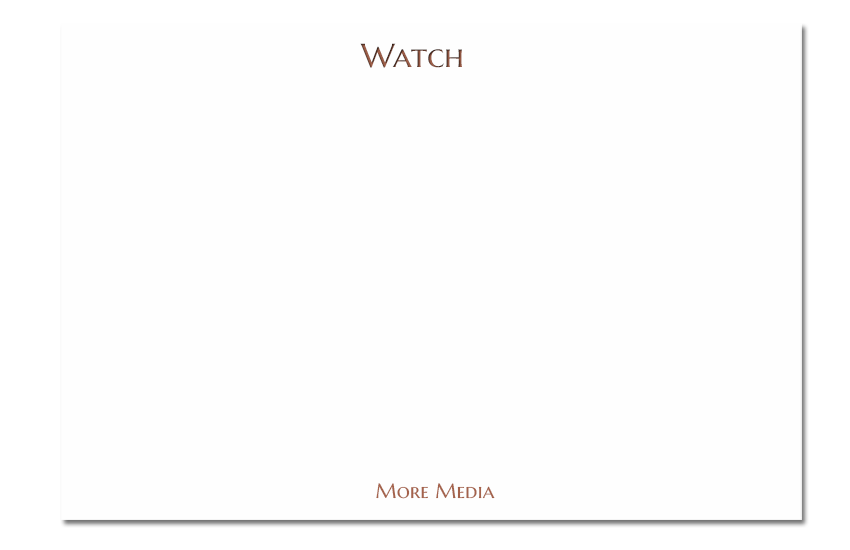
<style>
.page{position:relative;width:850px;height:550px;background:#fefefe}
.page>*{position:absolute;margin:0}
.t1{font:33.3px "MarcellusSC-Regular"}
.t2{font:20.8px "MarcellusSC-Regular";color:#a4624b}
</style>
<div class="page">
<p class="t1" style="left:360px;top:43px;width:102px;height:25px">Watch</p>
<p class="t2" style="left:376px;top:483px;width:119px;height:16px">More Media</p>
</div>
